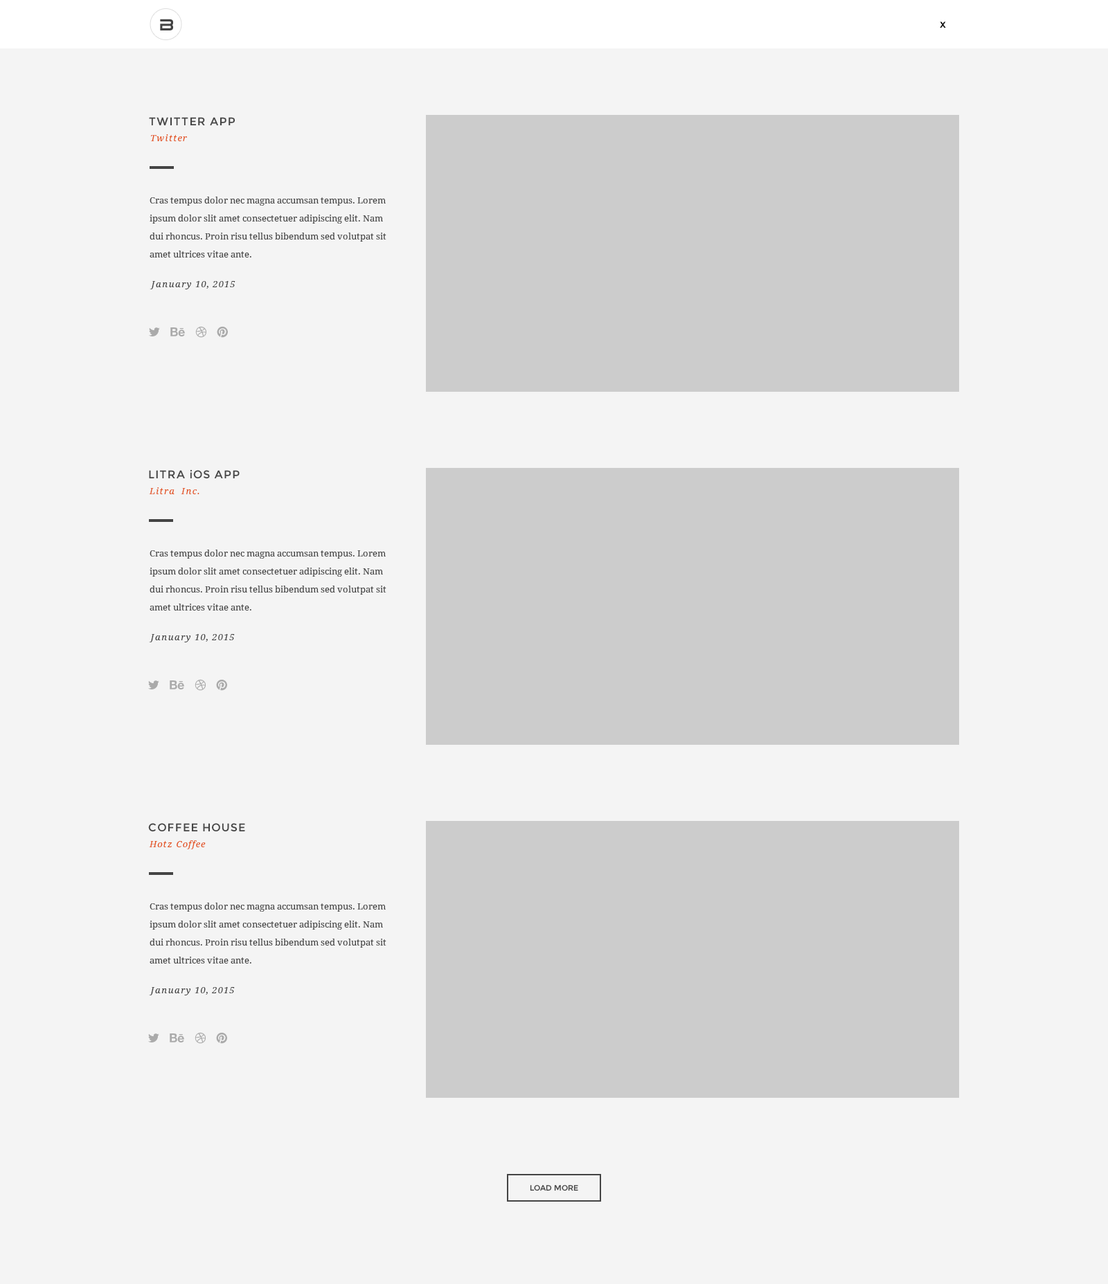
<style>
.page{position:relative;width:1108px;height:1284px;background:#f4f4f4}
.page>*{position:absolute;margin:0}
.t1{font:16.6px "Tele-MarinesBold";color:#444444}
.t2{font:11.1px "Montserrat-Regular";color:#000000}
.t3{font:11.1px "Montserrat-Regular";letter-spacing:0.08em;color:#444444}
.t4{font:9px "DroidSerif-Italic";letter-spacing:0.1em;color:#e35421}
.t5{font:9px/18px "DroidSerif";color:#444444}
.t6{font:9px "DroidSerif-Italic";letter-spacing:0.1em;color:#444444}
.t7{font:11.1px "Montserrat-Regular";letter-spacing:0.08em;color:#444444;text-transform:uppercase}
.t8{font:7.6px "Montserrat-Regular";color:#444444}
</style>
<div class="page">
<p class="t1" style="left:160px;top:19px;width:13px;height:11px">B</p>
<p class="t2" style="left:939px;top:21px;width:7px;height:7px">x</p>
<p class="t3" style="left:149px;top:117px;width:86px;height:9px">TWITTER APP</p>
<p class="t4" style="left:150px;top:134px;width:37px;height:7px">Twitter</p>
<p class="t5" style="left:150px;top:197px;width:236px;height:61px">Cras tempus dolor nec magna accumsan tempus. Lorem ipsum dolor slit amet consectetuer adipiscing elit. Nam dui rhoncus. Proin risu tellus bibendum sed volutpat sit amet ultrices vitae ante.</p>
<p class="t6" style="left:150px;top:281px;width:85px;height:8px">January 10, 2015</p>
<p class="t3" style="left:149px;top:469px;width:91px;height:10px">LITRA iOS APP</p>
<p class="t4" style="left:149px;top:487px;width:50px;height:7px">Litra  Inc.</p>
<p class="t5" style="left:150px;top:550px;width:236px;height:61px">Cras tempus dolor nec magna accumsan tempus. Lorem ipsum dolor slit amet consectetuer adipiscing elit. Nam dui rhoncus. Proin risu tellus bibendum sed volutpat sit amet ultrices vitae ante.</p>
<p class="t6" style="left:149px;top:634px;width:86px;height:8px">January 10, 2015</p>
<p class="t7" style="left:148px;top:823px;width:97px;height:9px">Coffee House</p>
<p class="t4" style="left:149px;top:840px;width:57px;height:9px">Hotz Coffee</p>
<p class="t5" style="left:150px;top:903px;width:236px;height:61px">Cras tempus dolor nec magna accumsan tempus. Lorem ipsum dolor slit amet consectetuer adipiscing elit. Nam dui rhoncus. Proin risu tellus bibendum sed volutpat sit amet ultrices vitae ante.</p>
<p class="t6" style="left:149px;top:987px;width:86px;height:9px">January 10, 2015</p>
<p class="t8" style="left:530px;top:1185px;width:48px;height:6px">LOAD MORE</p>
</div>
